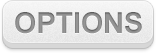
<style>
.page{position:relative;width:156px;height:53px}
.page>*{position:absolute;margin:0}
.t1{font:28.8px "Arial-BoldMT";color:#959595}
</style>
<div class="page">
<p class="t1" style="left:15px;top:12px;width:127px;height:22px">OPTIONS</p>
</div>
